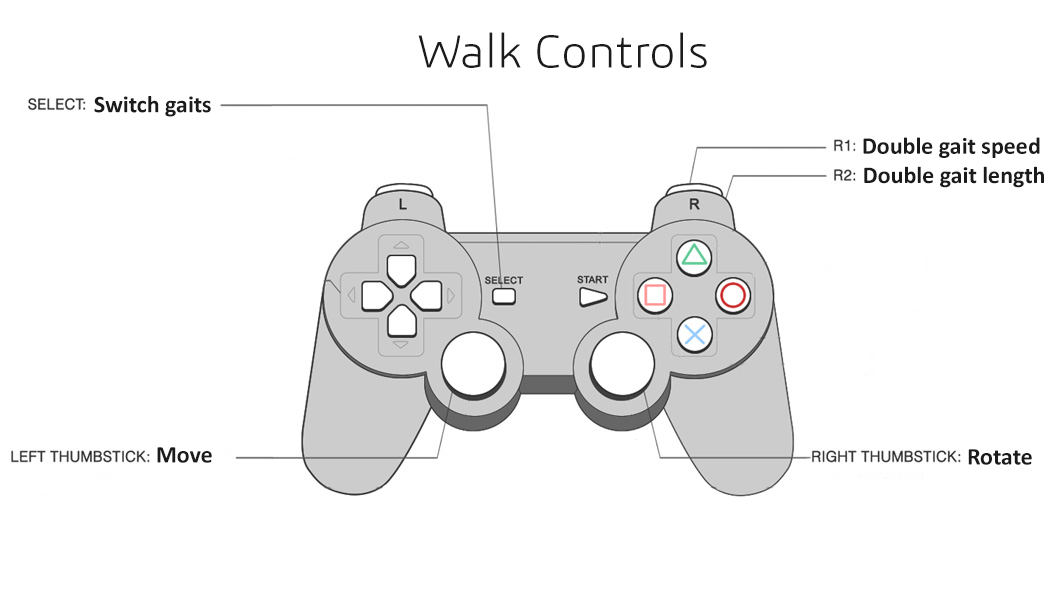
<style>
.page{position:relative;width:1056px;height:594px;background:#ffffff}
.page>*{position:absolute;margin:0}
.t1{font:48px "3ds-Light";color:#1b1b1b}
.t2{font:24px "Calibri-Bold";color:#1b1b1b}
</style>
<div class="page">
<p class="t1" style="left:418px;top:32px;width:289px;height:36px">Walk Controls</p>
<p class="t2" style="left:94px;top:96px;width:117px;height:21px">Switch gaits</p>
<p class="t2" style="left:863px;top:137px;width:177px;height:21px">Double gait speed</p>
<p class="t2" style="left:864px;top:166px;width:180px;height:22px">Double gait length</p>
<p class="t2" style="left:157px;top:447px;width:55px;height:16px">Move</p>
<p class="t2" style="left:968px;top:449px;width:64px;height:16px">Rotate</p>
</div>
